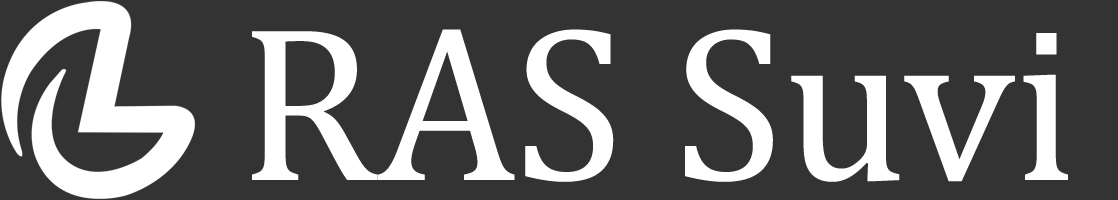
<style>
.page{position:relative;width:1118px;height:200px;background:#333333}
.page>*{position:absolute;margin:0}
.t1{font:223px "Cambria";color:#ffffff}
</style>
<div class="page">
<p class="t1" style="left:252px;top:29px;width:816px;height:153px">RAS Suvi</p>
</div>
